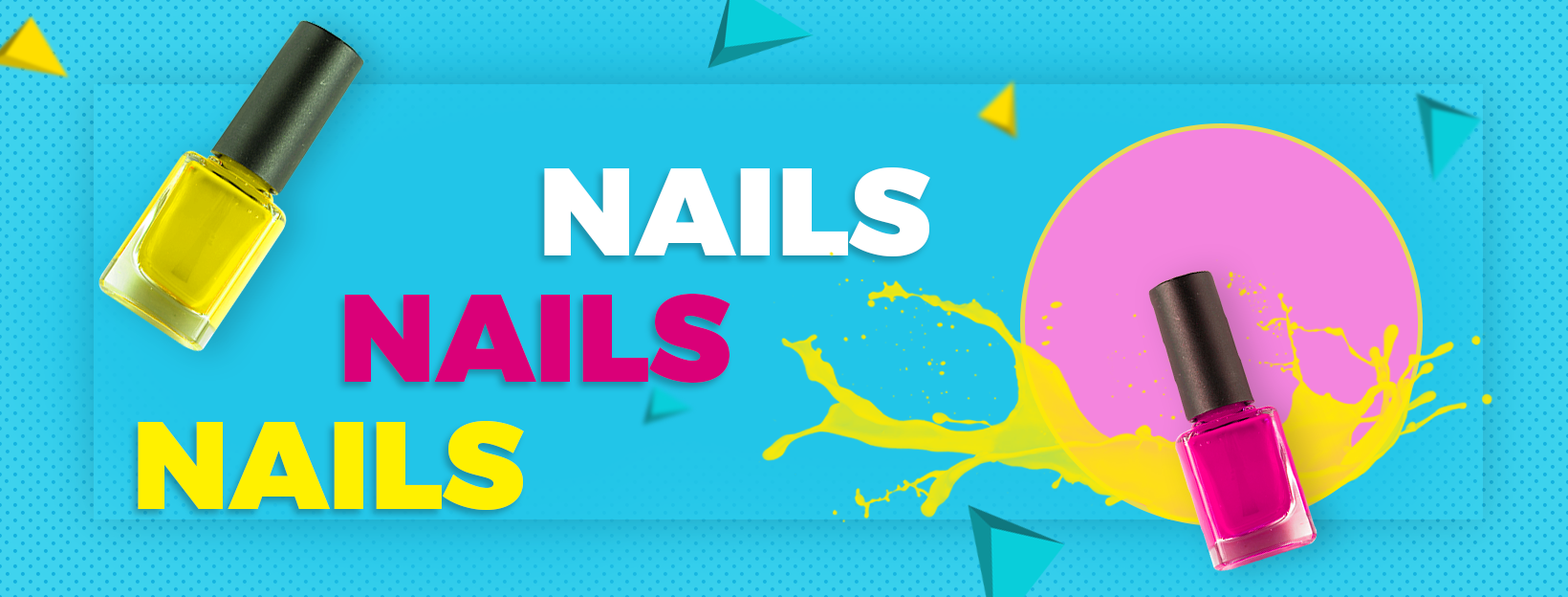
<style>
.page{position:relative;width:1568px;height:597px}
.page>*{position:absolute;margin:0}
.t1{font:124.3px "Montserrat-Black";color:#ffffff;text-transform:uppercase}
.t2{font:124.3px "Montserrat-Black";color:#da0078;text-transform:uppercase}
.t3{font:124.3px "Montserrat-Black";color:#fff100;text-transform:uppercase}
</style>
<div class="page">
<p class="t1" style="left:544px;top:167px;width:386px;height:89px">Nails</p>
<p class="t2" style="left:344px;top:294px;width:386px;height:88px">Nails</p>
<p class="t3" style="left:138px;top:421px;width:386px;height:89px">Nails</p>
</div>
